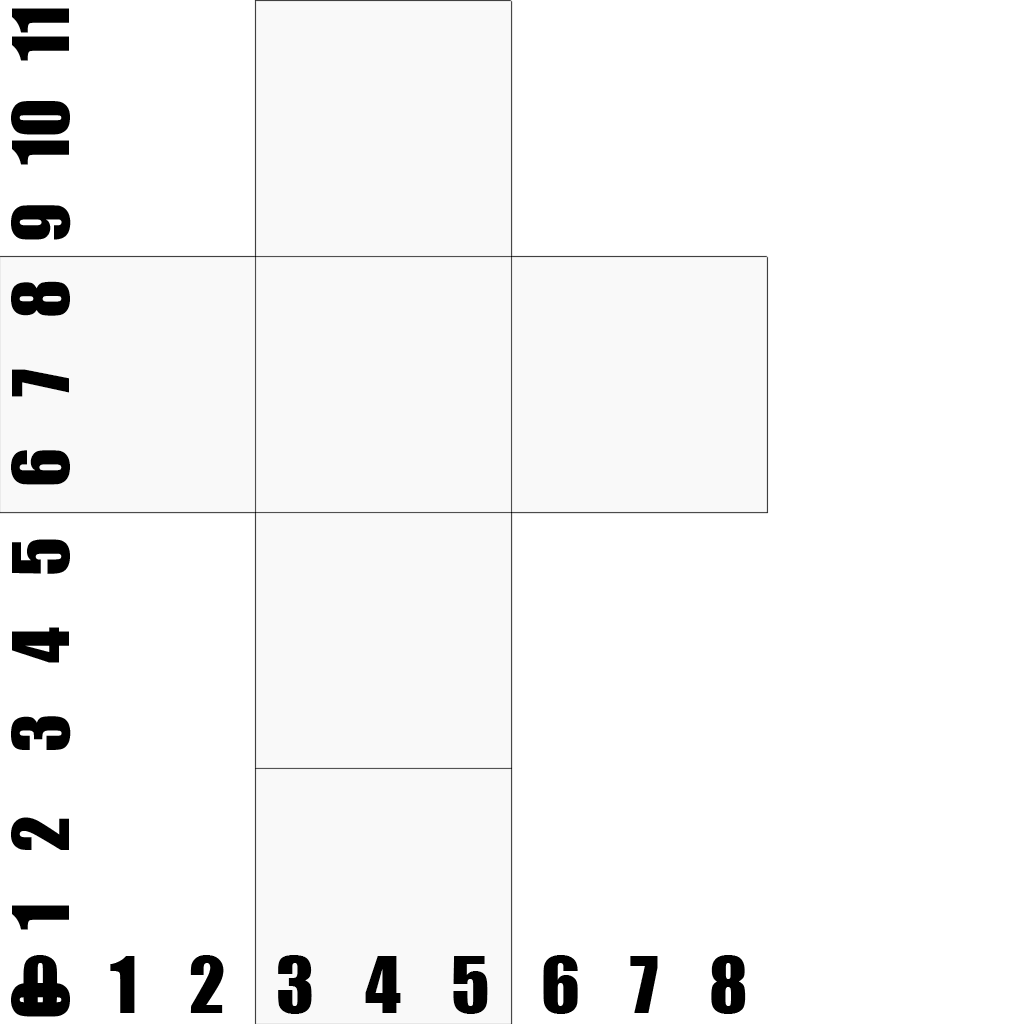
<style>
.page{position:relative;width:1024px;height:1024px;background:#ffffff}
.page>*{position:absolute;margin:0}
.t1{font:72px "Impact";color:#000000}
</style>
<div class="page">
<p class="t1" style="left:11px;top:8px;width:60px;height:1009px;rotate:-90deg">0    1    2     3    4    5    6    7    8   9   10   11</p>
<p class="t1" style="left:23px;top:955px;width:723px;height:59px">0    1    2    3    4    5    6    7    8</p>
</div>
